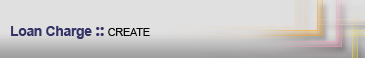
<style>
.page{position:relative;width:365px;height:58px;background:#e1e0e0}
.page>*{position:absolute;margin:0}
.t1{font:14px "Arial-BoldMT";letter-spacing:-0.025em;color:#333366}
.t2{font:18px "SegoeUI-Bold";letter-spacing:-0.025em;color:#333366}
.t3{font:11px "ArialMT";letter-spacing:-0.025em;color:#070707}
</style>
<div class="page">
<p class="t1" style="left:11px;top:26px;width:139px;height:13px">Loan Charge <span class="t2">:: </span><span class="t3">CREATE</span></p>
</div>
